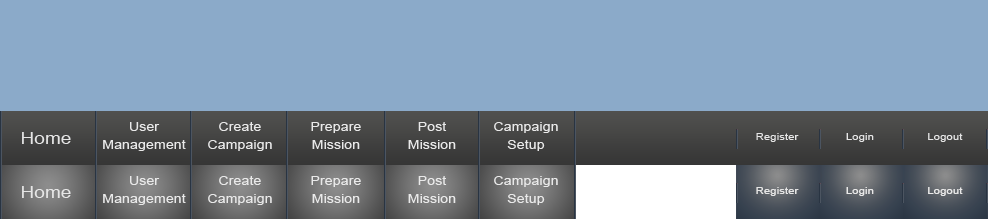
<style>
.page{position:relative;width:988px;height:219px;background:#8baac9}
.page>*{position:absolute;margin:0}
.t1{font:11.7px "ArialMT";color:#e9e9e9;scale:1.22 1}
.t2{font:15.6px "ArialMT";color:#e6e6e6;scale:1.22 1}
.t3{font:9.4px "ArialMT";color:#e6e6e6;scale:1.22 1}
.t4{font:9.4px "ArialMT";color:#e9e9e9;scale:1.22 1}
</style>
<div class="page">
<p class="t1" style="left:103px;top:122px;width:83px;height:29px;text-align:center">User<br>Management</p>
<p class="t1" style="left:103px;top:122px;width:83px;height:29px;text-align:center">User<br>Management</p>
<p class="t1" style="left:208px;top:122px;width:64px;height:29px;text-align:center">Create<br>Campaign</p>
<p class="t1" style="left:208px;top:122px;width:64px;height:29px;text-align:center">Create<br>Campaign</p>
<p class="t1" style="left:311px;top:122px;width:50px;height:27px;text-align:center">Prepare<br>Mission</p>
<p class="t1" style="left:311px;top:122px;width:50px;height:27px;text-align:center">Prepare<br>Mission</p>
<p class="t1" style="left:408px;top:122px;width:48px;height:27px;text-align:center">Post<br>Mission</p>
<p class="t1" style="left:408px;top:122px;width:48px;height:27px;text-align:center">Post<br>Mission</p>
<p class="t1" style="left:494px;top:122px;width:64px;height:29px;text-align:center">Campaign<br>Setup</p>
<p class="t1" style="left:494px;top:122px;width:64px;height:29px;text-align:center">Campaign<br>Setup</p>
<p class="t2" style="left:22px;top:132px;width:49px;height:12px">Home</p>
<p class="t3" style="left:756px;top:133px;width:43px;height:9px">Register</p>
<p class="t3" style="left:756px;top:133px;width:43px;height:9px">Register</p>
<p class="t3" style="left:846px;top:133px;width:28px;height:9px">Login</p>
<p class="t3" style="left:846px;top:133px;width:28px;height:9px">Login</p>
<p class="t3" style="left:928px;top:133px;width:35px;height:9px">Logout</p>
<p class="t3" style="left:928px;top:133px;width:35px;height:9px">Logout</p>
<p class="t1" style="left:103px;top:176px;width:83px;height:29px;text-align:center">User<br>Management</p>
<p class="t1" style="left:103px;top:176px;width:83px;height:29px;text-align:center">User<br>Management</p>
<p class="t1" style="left:208px;top:176px;width:64px;height:29px;text-align:center">Create<br>Campaign</p>
<p class="t1" style="left:208px;top:176px;width:64px;height:29px;text-align:center">Create<br>Campaign</p>
<p class="t1" style="left:311px;top:176px;width:50px;height:27px;text-align:center">Prepare<br>Mission</p>
<p class="t1" style="left:311px;top:176px;width:50px;height:27px;text-align:center">Prepare<br>Mission</p>
<p class="t1" style="left:408px;top:176px;width:48px;height:27px;text-align:center">Post<br>Mission</p>
<p class="t1" style="left:408px;top:176px;width:48px;height:27px;text-align:center">Post<br>Mission</p>
<p class="t1" style="left:494px;top:176px;width:64px;height:29px;text-align:center">Campaign<br>Setup</p>
<p class="t1" style="left:494px;top:176px;width:64px;height:29px;text-align:center">Campaign<br>Setup</p>
<p class="t2" style="left:22px;top:186px;width:49px;height:12px">Home</p>
<p class="t3" style="left:756px;top:187px;width:43px;height:9px">Register</p>
<p class="t3" style="left:756px;top:187px;width:43px;height:9px">Register</p>
<p class="t4" style="left:846px;top:187px;width:28px;height:9px">Login</p>
<p class="t4" style="left:846px;top:187px;width:28px;height:9px">Login</p>
<p class="t4" style="left:928px;top:187px;width:35px;height:9px">Logout</p>
<p class="t4" style="left:928px;top:187px;width:35px;height:9px">Logout</p>
</div>
